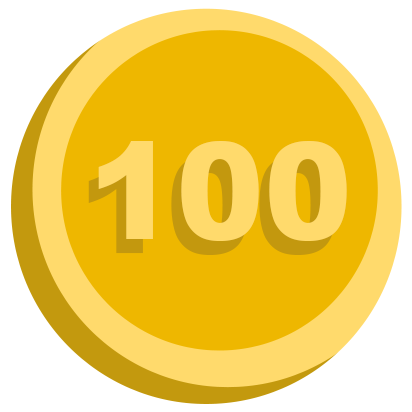
<style>
.page{position:relative;width:412px;height:412px;background:#eeb700}
.page>*{position:absolute;margin:0}
.t1{font:133.5px "Arial-Black";color:#ffda6c}
</style>
<div class="page">
<p class="t1" style="left:98px;top:141px;width:249px;height:100px">100</p>
</div>
